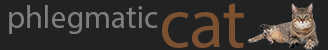
<style>
.page{position:relative;width:328px;height:50px;background:#222222}
.page>*{position:absolute;margin:0}
.t1{font:32px "MyriadPro-Regular";color:#7f7f7f}
.t2{font:69.5px "MyriadPro-Regular";color:#7c5132}
</style>
<div class="page">
<p class="t1" style="left:9px;top:5px;width:149px;height:29px">phlegmatic</p>
<p class="t2" style="left:162px;top:3px;width:82px;height:45px">cat</p>
</div>
